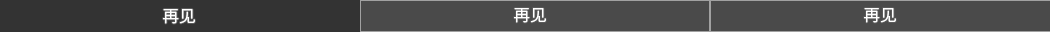
<style>
.page{position:relative;width:1050px;height:32px;background:#4a4a4a}
.page>*{position:absolute;margin:0}
.t1{font:16.7px "SourceHanSansSC-Normal";color:#ffffff}
</style>
<div class="page">
<p class="t1" style="left:163px;top:9px;width:32px;height:15px">再见</p>
<p class="t1" style="left:514px;top:8px;width:32px;height:15px">再见</p>
<p class="t1" style="left:864px;top:8px;width:32px;height:15px">再见</p>
</div>
